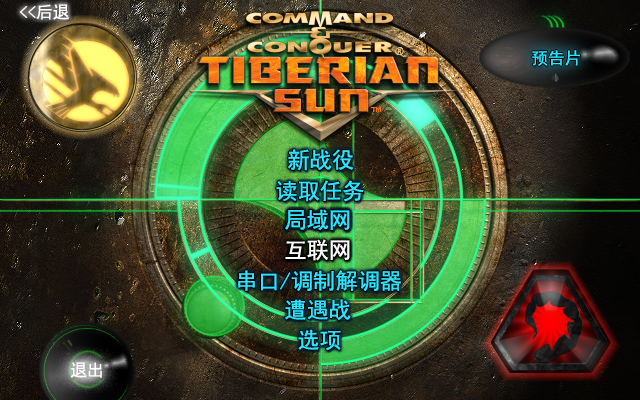
<style>
.page{position:relative;width:640px;height:400px}
.page>*{position:absolute;margin:0}
.t1{font:16.7px "SimHei";letter-spacing:0.002em;color:#ffffff}
.t2{font:16.7px "SimHei";color:#2de4ff}
.t3{font:22.2px "SimHei";color:#2de4ff}
.t4{font:22.2px "SimHei";letter-spacing:0.002em;color:#2de4ff}
.t5{font:22.2px "SimHei";letter-spacing:0.002em;color:#ffffff}
</style>
<div class="page">
<p class="t1" style="left:19px;top:4px;width:50px;height:16px">&lt;&lt;后退</p>
<p class="t2" style="left:532px;top:50px;width:48px;height:16px">预告片</p>
<p class="t3" style="left:288px;top:149px;width:66px;height:22px">新战役</p>
<p class="t3" style="left:276px;top:180px;width:88px;height:22px">读取任务</p>
<p class="t4" style="left:285px;top:209px;width:65px;height:21px">局域网</p>
<p class="t3" style="left:285px;top:209px;width:65px;height:21px">局域网</p>
<p class="t5" style="left:285px;top:239px;width:65px;height:22px">互联网</p>
<p class="t3" style="left:238px;top:270px;width:163px;height:21px">串口/调制解调器</p>
<p class="t3" style="left:285px;top:299px;width:66px;height:21px">遭遇战</p>
<p class="t3" style="left:298px;top:329px;width:43px;height:22px">选项</p>
<p class="t1" style="left:70px;top:362px;width:32px;height:16px">退出</p>
</div>
